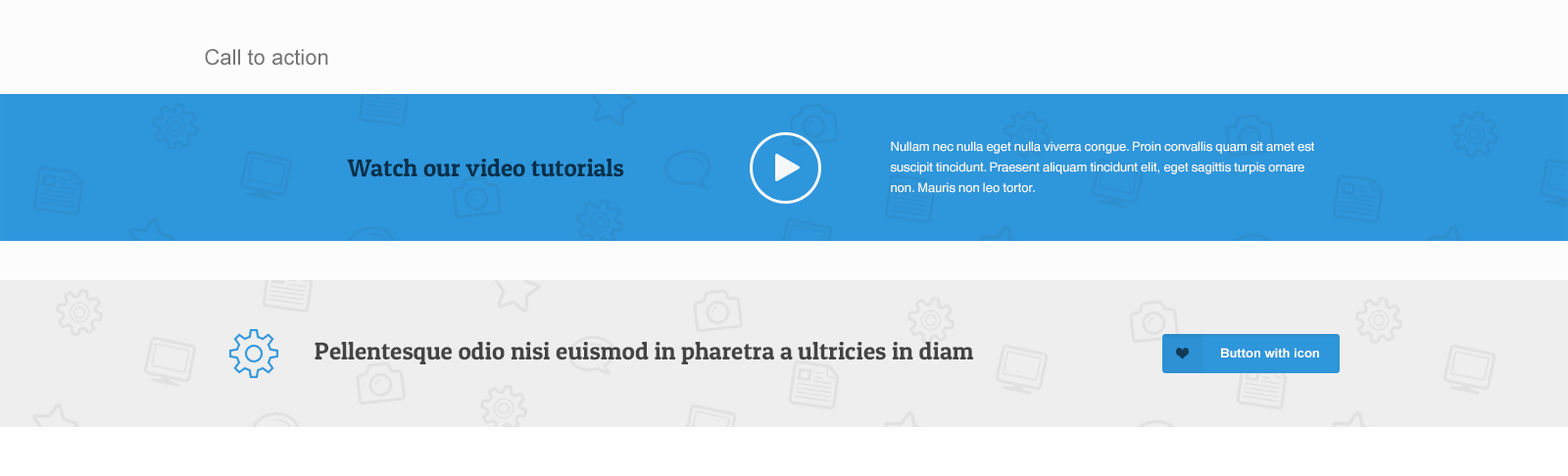
<style>
.page{position:relative;width:1568px;height:476px;background:#fcfcfc}
.page>*{position:absolute;margin:0}
.t1{font:21.6px "ArialMT";color:#737373}
.t2{font:12.7px/20.5px "HelveticaWorld-Regular";color:#ffffff}
.t3{font:24.5px "PatuaOne-Regular";color:#09304a}
.t4{font:24.5px "PatuaOne-Regular";color:#444444}
.t5{font:12.7px "Arial-BoldMT";color:#ffffff}
</style>
<div class="page">
<p class="t1" style="left:205px;top:49px;width:123px;height:17px">Call to action</p>
<p class="t2" style="left:890px;top:141px;width:424px;height:52px">Nullam nec nulla eget nulla viverra congue. Proin convallis quam sit amet est suscipit tincidunt. Praesent aliquam tincidunt elit, eget sagittis turpis ornare non. Mauris non leo tortor.</p>
<p class="t3" style="left:347px;top:159px;width:277px;height:18px">Watch our video tutorials</p>
<p class="t4" style="left:315px;top:342px;width:659px;height:23px">Pellentesque odio nisi euismod in pharetra a ultricies in diam</p>
<p class="t5" style="left:1221px;top:348px;width:98px;height:10px">Button with icon</p>
</div>
